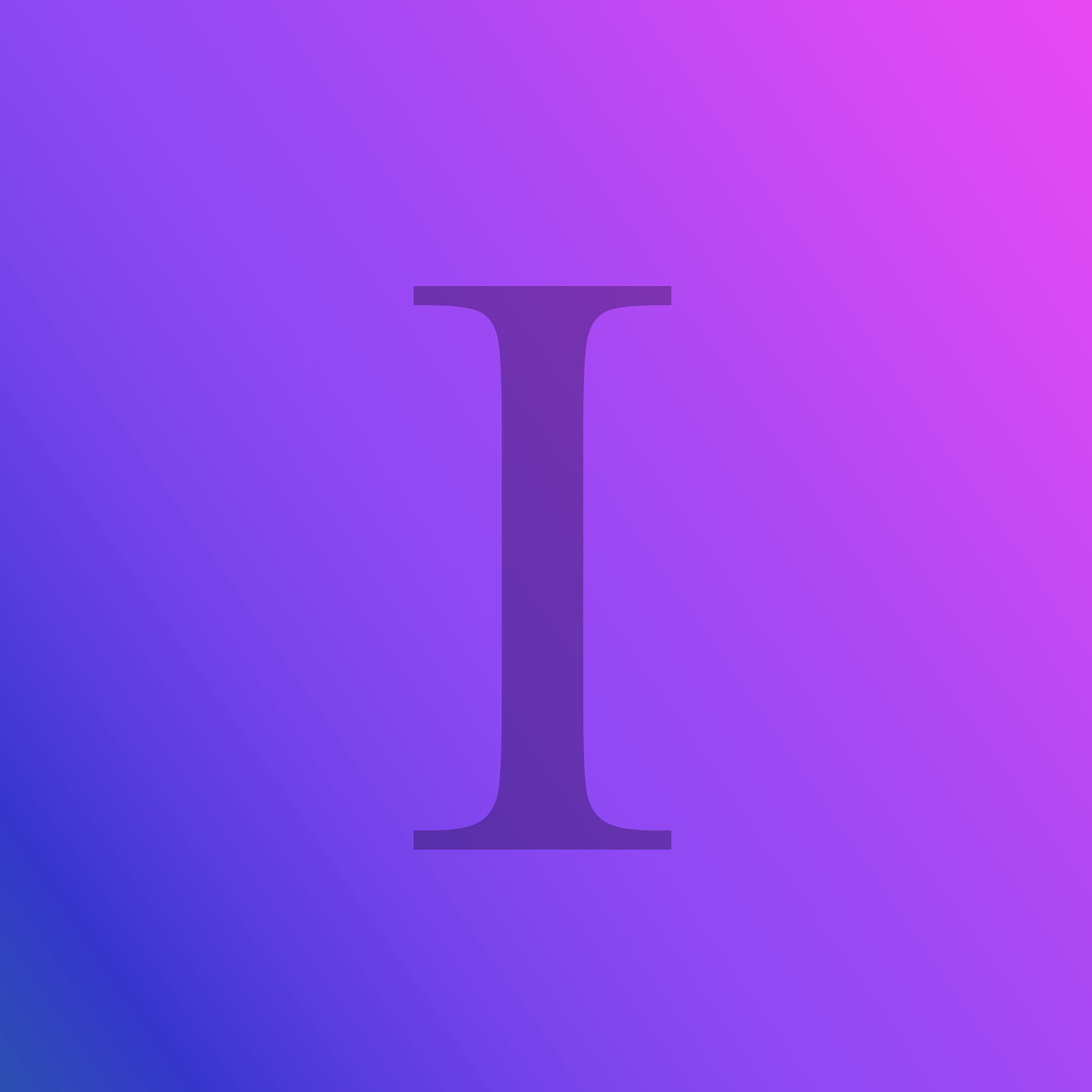
<style>
.page{position:relative;width:1092px;height:1092px}
.page>*{position:absolute;margin:0}
.t1{font:850.9px "Baskerville";letter-spacing:0.14em;color:#6a32af;text-transform:uppercase}
</style>
<div class="page">
<p class="t1" style="left:413px;top:286px;width:259px;height:564px">i</p>
</div>
